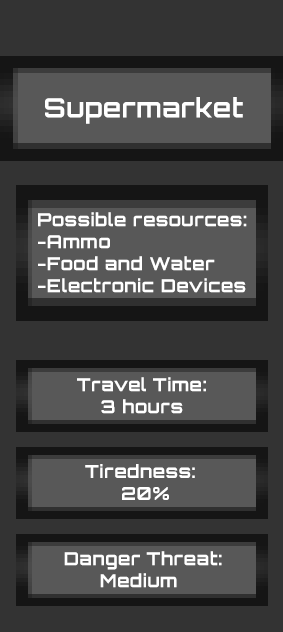
<style>
.page{position:relative;width:283px;height:632px;background:#333333}
.page>*{position:absolute;margin:0}
.t1{font:26.7px "Orbitron-Bold";letter-spacing:0.02em;color:#ffffff}
.t2{font:18.3px "Orbitron-Bold";letter-spacing:0.02em;color:#ffffff}
</style>
<div class="page">
<p class="t1" style="left:45px;top:97px;width:198px;height:27px">Supermarket</p>
<p class="t2" style="left:38px;top:212px;width:209px;height:81px">Possible resources:<br>-Ammo<br>-Food and Water<br>-Electronic Devices</p>
<p class="t2" style="left:77px;top:377px;width:129px;height:37px">Travel Time:<br>    3 hours</p>
<p class="t2" style="left:85px;top:464px;width:110px;height:36px">Tiredness:<br> 20%</p>
<p class="t2" style="left:64px;top:551px;width:158px;height:37px">Danger Threat:<br> Medium</p>
</div>
